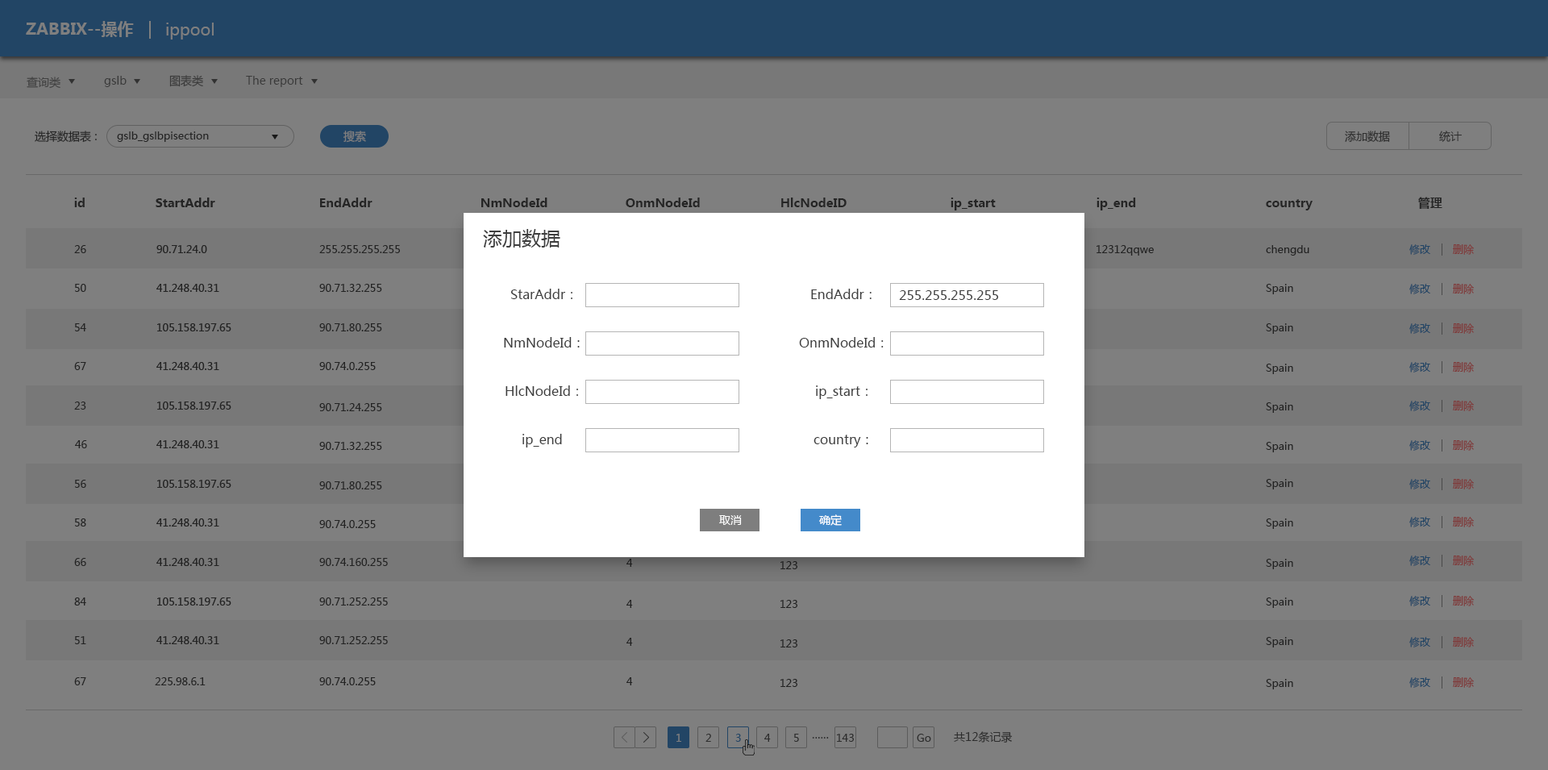
<style>
.page{position:relative;width:1548px;height:770px;background:#7f7f7f}
.page>*{position:absolute;margin:0}
.t1{font:16.1px "MicrosoftYaHei-Bold";color:#7f7f7f}
.t2{font:16.1px "MicrosoftYaHei";color:#7f7f7f}
.t3{font:11.3px "MicrosoftYaHei";color:#3b3b3b}
.t4{font:11.3px "MicrosoftYaHei";color:#3a3a3a}
.t5{font:11.3px "MicrosoftYaHei";color:#252525}
.t6{font:10.5px "MicrosoftYaHei";color:#252525}
.t7{font:11.3px "MicrosoftYaHei";color:#7f7f7f}
.t8{font:11.3px "MicrosoftYaHei";color:#2e2e2e}
.t9{font:12.1px "MicrosoftYaHei-Bold";color:#252525}
.t10{font:19.4px "MicrosoftYaHei";color:#3e3e3e}
.t11{font:10.5px "MicrosoftYaHei";color:#232323}
.t12{font:10.5px "MicrosoftYaHei";color:#224565}
.t13{font:10.5px "MicrosoftYaHei";color:#7f3c3c}
.t14{font:12.9px "MicrosoftYaHei";color:#3e3e3e}
.t15{font:11.3px "MicrosoftYaHei";color:#ffffff}
.t16{font:10.5px "MicrosoftYaHei";color:#1e1e1e}
.t17{font:10.5px "MicrosoftYaHei";color:#202020}
.t18{font:10.5px "MicrosoftYaHei";color:#7f7f7f}
.t19{font:10.5px "MicrosoftYaHei";color:#2d2d2d}
.t20{font:11.3px "MicrosoftYaHei";color:#2d2d2d}
</style>
<div class="page">
<p class="t1" style="left:26px;top:21px;width:108px;height:16px">ZABBIX--操作</p>
<p class="t2" style="left:166px;top:23px;width:48px;height:17px">ippool</p>
<p class="t3" style="left:27px;top:77px;width:33px;height:12px;opacity:0.7">查询类</p>
<p class="t4" style="left:104px;top:76px;width:23px;height:11px">gslb</p>
<p class="t4" style="left:169px;top:75px;width:34px;height:12px">图表类</p>
<p class="t4" style="left:246px;top:76px;width:57px;height:11px">The report</p>
<p class="t5" style="left:35px;top:131px;width:62px;height:12px">选择数据表 :</p>
<p class="t6" style="left:117px;top:131px;width:92px;height:11px">gslb_gslbpisection</p>
<p class="t7" style="left:344px;top:131px;width:22px;height:12px">搜索</p>
<p class="t8" style="left:1345px;top:131px;width:45px;height:12px">添加数据</p>
<p class="t8" style="left:1439px;top:131px;width:23px;height:11px">统计</p>
<p class="t9" style="left:74px;top:198px;width:11px;height:9px">id</p>
<p class="t9" style="left:320px;top:198px;width:53px;height:9px">EndAddr</p>
<p class="t9" style="left:481px;top:198px;width:67px;height:9px">NmNodeId</p>
<p class="t9" style="left:626px;top:198px;width:74px;height:9px">OnmNodeId</p>
<p class="t9" style="left:781px;top:198px;width:66px;height:9px">HlcNodeID</p>
<p class="t9" style="left:951px;top:198px;width:45px;height:12px">ip_start</p>
<p class="t9" style="left:1097px;top:198px;width:39px;height:12px">ip_end</p>
<p class="t9" style="left:1419px;top:197px;width:24px;height:12px">管理</p>
<p class="t9" style="left:1266px;top:199px;width:47px;height:11px">country</p>
<p class="t10" style="left:483px;top:229px;width:77px;height:19px">添加数据</p>
<p class="t11" style="left:74px;top:245px;width:12px;height:8px">26</p>
<p class="t11" style="left:319px;top:245px;width:81px;height:8px">255.255.255.255</p>
<p class="t11" style="left:1097px;top:245px;width:57px;height:11px">12312qqwe</p>
<p class="t11" style="left:1266px;top:245px;width:44px;height:11px">chengdu</p>
<p class="t12" style="left:1410px;top:244px;width:21px;height:11px">修改</p>
<p class="t13" style="left:1453px;top:244px;width:21px;height:11px">删除</p>
<p class="t11" style="left:75px;top:284px;width:11px;height:8px">50</p>
<p class="t11" style="left:319px;top:284px;width:63px;height:8px">90.71.32.255</p>
<p class="t14" style="left:510px;top:289px;width:63px;height:10px">StarAddr：</p>
<p class="t14" style="left:811px;top:289px;width:61px;height:10px">EndAddr：</p>
<p class="t14" style="left:899px;top:290px;width:100px;height:10px">255.255.255.255</p>
<p class="t11" style="left:1266px;top:284px;width:28px;height:10px">Spain</p>
<p class="t12" style="left:1410px;top:284px;width:21px;height:10px">修改</p>
<p class="t13" style="left:1453px;top:284px;width:21px;height:10px">删除</p>
<p class="t11" style="left:75px;top:323px;width:11px;height:8px">54</p>
<p class="t11" style="left:319px;top:323px;width:63px;height:8px">90.71.80.255</p>
<p class="t11" style="left:1266px;top:323px;width:28px;height:11px">Spain</p>
<p class="t12" style="left:1410px;top:323px;width:21px;height:11px">修改</p>
<p class="t13" style="left:1453px;top:323px;width:21px;height:11px">删除</p>
<p class="t14" style="left:504px;top:337px;width:76px;height:11px">NmNodeId：</p>
<p class="t14" style="left:799px;top:337px;width:85px;height:11px">OnmNodeId：</p>
<p class="t11" style="left:74px;top:362px;width:12px;height:8px">67</p>
<p class="t11" style="left:319px;top:362px;width:57px;height:8px">90.74.0.255</p>
<p class="t11" style="left:1266px;top:364px;width:28px;height:10px">Spain</p>
<p class="t12" style="left:1410px;top:362px;width:21px;height:11px">修改</p>
<p class="t13" style="left:1453px;top:362px;width:21px;height:11px">删除</p>
<p class="t14" style="left:506px;top:385px;width:72px;height:11px">HlcNodeId：</p>
<p class="t14" style="left:816px;top:385px;width:52px;height:14px">ip_start：</p>
<p class="t11" style="left:74px;top:402px;width:12px;height:8px">23</p>
<p class="t12" style="left:1410px;top:401px;width:21px;height:10px">修改</p>
<p class="t13" style="left:1453px;top:401px;width:21px;height:10px">删除</p>
<p class="t11" style="left:319px;top:403px;width:63px;height:8px">90.71.24.255</p>
<p class="t11" style="left:1266px;top:402px;width:28px;height:11px">Spain</p>
<p class="t14" style="left:523px;top:434px;width:39px;height:14px">ip_end</p>
<p class="t14" style="left:814px;top:435px;width:55px;height:13px">country：</p>
<p class="t11" style="left:75px;top:440px;width:12px;height:8px">46</p>
<p class="t11" style="left:319px;top:442px;width:63px;height:8px">90.71.32.255</p>
<p class="t11" style="left:1266px;top:442px;width:28px;height:10px">Spain</p>
<p class="t12" style="left:1410px;top:440px;width:21px;height:11px">修改</p>
<p class="t13" style="left:1453px;top:440px;width:21px;height:11px">删除</p>
<p class="t11" style="left:75px;top:480px;width:11px;height:8px">56</p>
<p class="t11" style="left:319px;top:481px;width:63px;height:9px">90.71.80.255</p>
<p class="t11" style="left:1266px;top:479px;width:28px;height:11px">Spain</p>
<p class="t12" style="left:1410px;top:479px;width:21px;height:11px">修改</p>
<p class="t13" style="left:1453px;top:479px;width:21px;height:11px">删除</p>
<p class="t11" style="left:75px;top:519px;width:11px;height:8px">58</p>
<p class="t11" style="left:319px;top:520px;width:57px;height:8px">90.74.0.255</p>
<p class="t15" style="left:719px;top:515px;width:23px;height:10px">取消</p>
<p class="t15" style="left:819px;top:514px;width:23px;height:12px">确定</p>
<p class="t11" style="left:1266px;top:519px;width:28px;height:10px">Spain</p>
<p class="t12" style="left:1410px;top:517px;width:21px;height:10px">修改</p>
<p class="t13" style="left:1453px;top:517px;width:21px;height:10px">删除</p>
<p class="t12" style="left:1410px;top:556px;width:21px;height:10px">修改</p>
<p class="t13" style="left:1453px;top:556px;width:21px;height:10px">删除</p>
<p class="t11" style="left:74px;top:558px;width:12px;height:8px">66</p>
<p class="t11" style="left:319px;top:558px;width:69px;height:8px">90.74.160.255</p>
<p class="t16" style="left:627px;top:559px;width:6px;height:8px">4</p>
<p class="t17" style="left:781px;top:561px;width:17px;height:8px">123</p>
<p class="t11" style="left:1266px;top:559px;width:28px;height:10px">Spain</p>
<p class="t11" style="left:74px;top:598px;width:12px;height:8px">84</p>
<p class="t11" style="left:319px;top:598px;width:69px;height:8px">90.71.252.255</p>
<p class="t11" style="left:627px;top:600px;width:6px;height:8px">4</p>
<p class="t11" style="left:781px;top:600px;width:17px;height:8px">123</p>
<p class="t11" style="left:1266px;top:598px;width:28px;height:10px">Spain</p>
<p class="t12" style="left:1410px;top:596px;width:21px;height:10px">修改</p>
<p class="t13" style="left:1453px;top:596px;width:21px;height:10px">删除</p>
<p class="t11" style="left:75px;top:636px;width:11px;height:8px">51</p>
<p class="t11" style="left:319px;top:636px;width:69px;height:8px">90.71.252.255</p>
<p class="t11" style="left:627px;top:638px;width:6px;height:8px">4</p>
<p class="t11" style="left:781px;top:639px;width:17px;height:9px">123</p>
<p class="t11" style="left:1266px;top:637px;width:28px;height:11px">Spain</p>
<p class="t12" style="left:1410px;top:637px;width:21px;height:11px">修改</p>
<p class="t13" style="left:1453px;top:637px;width:21px;height:11px">删除</p>
<p class="t11" style="left:74px;top:677px;width:12px;height:8px">67</p>
<p class="t11" style="left:155px;top:677px;width:51px;height:8px">225.98.6.1</p>
<p class="t11" style="left:319px;top:677px;width:57px;height:8px">90.74.0.255</p>
<p class="t11" style="left:627px;top:677px;width:6px;height:8px">4</p>
<p class="t12" style="left:1410px;top:677px;width:21px;height:11px">修改</p>
<p class="t13" style="left:1453px;top:677px;width:21px;height:11px">删除</p>
<p class="t11" style="left:781px;top:679px;width:17px;height:8px">123</p>
<p class="t11" style="left:1266px;top:679px;width:28px;height:10px">Spain</p>
<p class="t18" style="left:677px;top:734px;width:4px;height:8px">1</p>
<p class="t19" style="left:706px;top:734px;width:5px;height:8px">2</p>
<p class="t12" style="left:735px;top:734px;width:6px;height:8px">3</p>
<p class="t19" style="left:764px;top:734px;width:7px;height:8px">4</p>
<p class="t19" style="left:794px;top:734px;width:5px;height:8px">5</p>
<p class="t19" style="left:812px;top:737px;width:17px;height:2px">……</p>
<p class="t19" style="left:837px;top:734px;width:17px;height:8px">143</p>
<p class="t19" style="left:917px;top:734px;width:14px;height:8px">Go</p>
<p class="t20" style="left:954px;top:731px;width:59px;height:12px">共12条记录</p>
</div>
